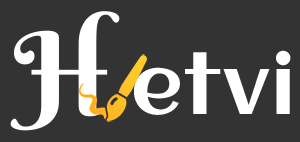
<style>
.page{position:relative;width:300px;height:142px;background:#333333}
.page>*{position:absolute;margin:0}
.t1{font:110px "BerkshireSwash-Regular";letter-spacing:0.02em;color:#ffffff}
.t2{font:80px "Aclonica-Regular";letter-spacing:0.02em;color:#ffffff}
</style>
<div class="page">
<p class="t1" style="left:10px;top:11px;width:110px;height:120px">H</p>
<p class="t2" style="left:134px;top:50px;width:157px;height:65px">etvi</p>
</div>
